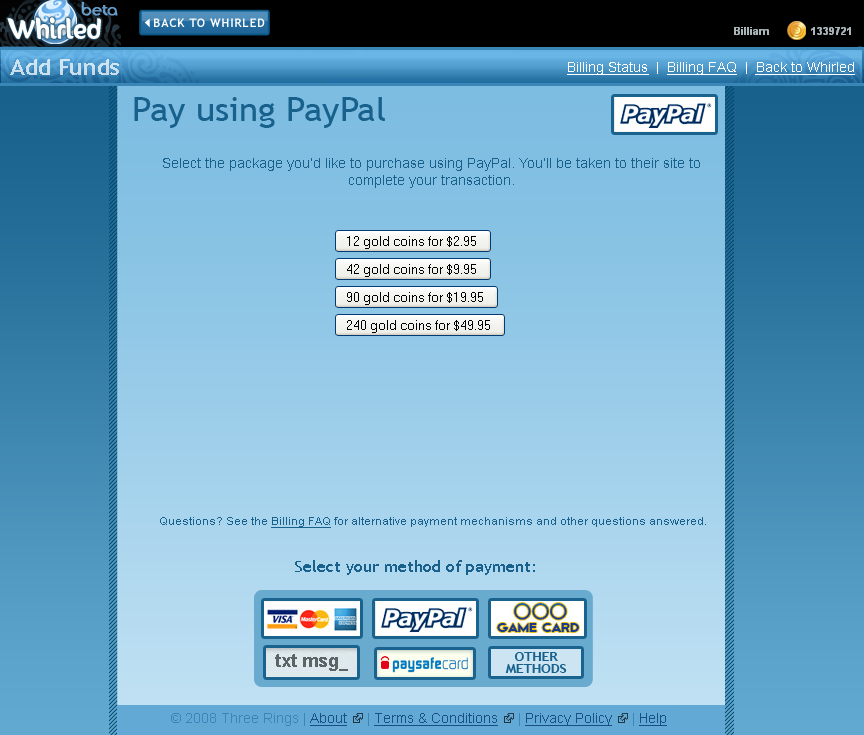
<style>
.page{position:relative;width:864px;height:735px}
.page>*{position:absolute;margin:0}
.t1{font:11.6px "TrebuchetMS-Bold";letter-spacing:0.075em;color:#ffffff}
.t2{font:21.8px "TrebuchetMS-Bold";color:#cce1ef;scale:1.07 1}
.t3{font:12.7px "ArialMT";color:#ffffff;text-decoration:underline;scale:1.07 1}
.t4{font:12.7px "ArialMT";color:#ffffff;scale:1.07 1}
.t5{font:32.8px "TrebuchetMS";color:#18618d;scale:1.07 1}
.t6{font:12.7px "ArialMT";color:#18618d;scale:1.07 1}
.t7{font:10.9px "ArialMT";color:#18618d;scale:1.07 1}
.t8{font:10.9px "ArialMT";color:#18618d;text-decoration:underline;scale:1.07 1}
.t9{font:16.4px "TrebuchetMS";color:#18618d;scale:1.07 1}
</style>
<div class="page">
<p class="t1" style="left:154px;top:18px;width:111px;height:9px">BACK TO WHIRLED</p>
<p class="t2" style="left:10px;top:59px;width:109px;height:16px">Add Funds</p>
<p class="t3" style="left:567px;top:62px;width:288px;height:13px">Billing Status<span class="t4">  |  </span>Billing FAQ<span class="t4">  |  </span>Back to Whirled</p>
<p class="t5" style="left:134px;top:97px;width:251px;height:31px">Pay using PayPal</p>
<p class="t6" style="left:163px;top:158px;width:537px;height:30px;text-align:center">Select the package you'd like to purchase using PayPal. You'll be taken to their site to<br>complete your transaction.</p>
<p class="t7" style="left:160px;top:517px;width:546px;height:11px">Questions? See the <span class="t8">Billing FAQ</span> for alternative payment mechanisms and other questions answered.</p>
<p class="t9" style="left:295px;top:560px;width:240px;height:15px">Select your method of payment:</p>
</div>
